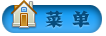
<style>
.page{position:relative;width:106px;height:36px;background:#ffffff}
.page>*{position:absolute;margin:0}
.t1{font:18px "JJianzi";color:#064c7d}
</style>
<div class="page">
<p class="t1" style="left:45px;top:10px;width:45px;height:18px">菜  单</p>
</div>
